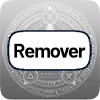
<style>
.page{position:relative;width:100px;height:100px;background:#ffffff}
.page>*{position:absolute;margin:0}
.t1{font:20px "Barlow-Bold";letter-spacing:-0.05em;color:#000000}
</style>
<div class="page">
<p class="t1" style="left:14px;top:43px;width:72px;height:15px">Remover</p>
</div>
